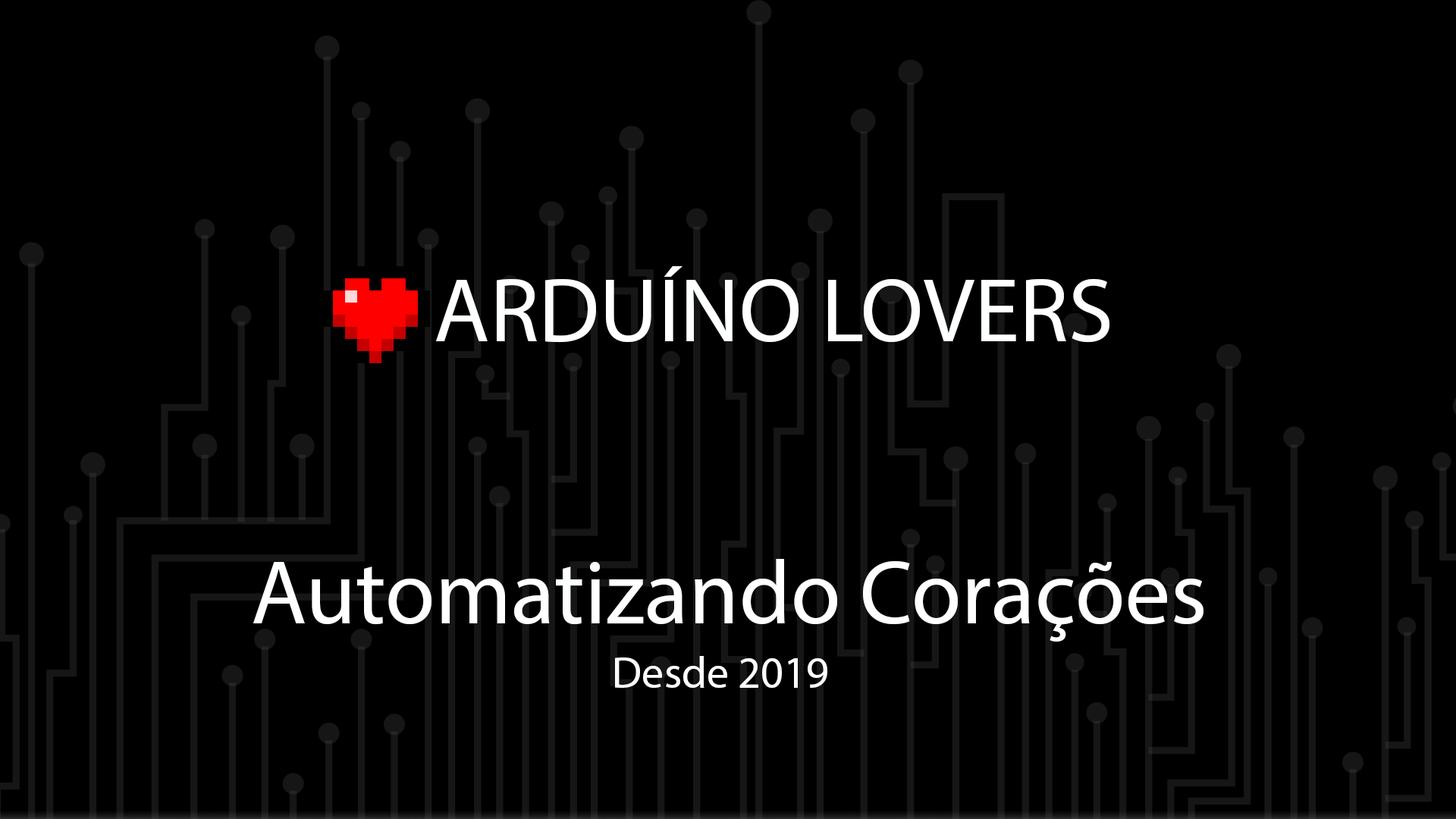
<style>
.page{position:relative;width:1456px;height:819px;background:#000000}
.page>*{position:absolute;margin:0}
.t1{font:91px "MyriadPro-Regular";color:#feffff}
.t2{font:44.2px "MyriadPro-Regular";color:#feffff}
</style>
<div class="page">
<p class="t1" style="left:436px;top:266px;width:673px;height:77px">ARDUÍNO LOVERS</p>
<p class="t1" style="left:253px;top:559px;width:950px;height:83px">Automatizando Corações</p>
<p class="t2" style="left:615px;top:656px;width:212px;height:32px">Desde 2019</p>
</div>
